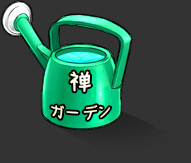
<style>
.page{position:relative;width:191px;height:163px;background:#333333}
.page>*{position:absolute;margin:0}
.t1{font:23.6px "cjkFontsSetoFontBold-Regular";color:#ffffff;text-transform:uppercase}
.t2{font:17.2px "cjkFontsSetoFontBold-Regular";color:#ffffff;text-transform:uppercase}
</style>
<div class="page">
<p class="t1" style="left:70px;top:71px;width:21px;height:21px">禅</p>
<p class="t2" style="left:51px;top:105px;width:60px;height:15px">ガーデン</p>
</div>
